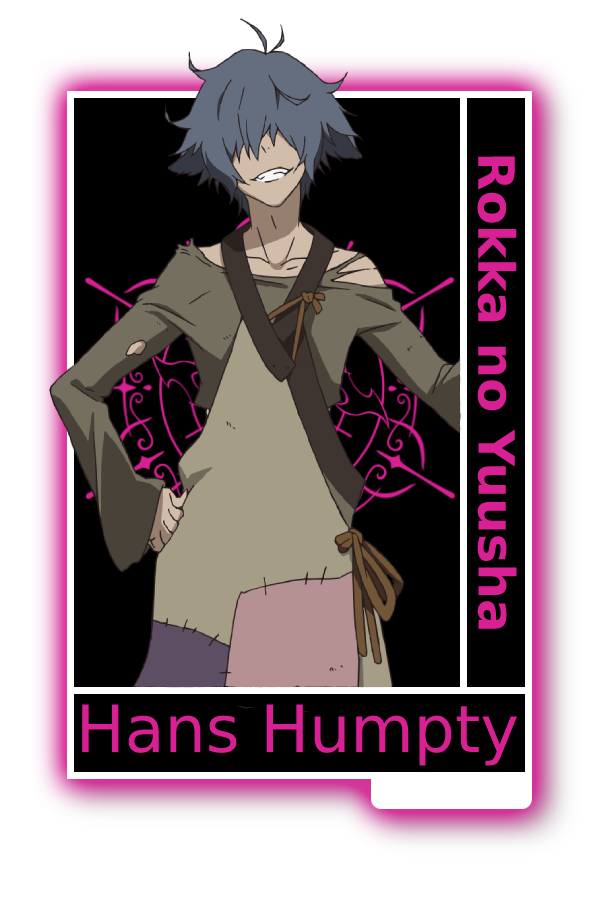
<style>
.page{position:relative;width:600px;height:900px;background:#000000}
.page>*{position:absolute;margin:0}
.t1{font:50px "MADETOMMY-Bold";color:#d81f94}
.t2{font:65px "CoolveticaRg-Regular";color:#d81f94}
</style>
<div class="page">
<p class="t1" style="left:477px;top:156px;width:40px;height:473px;rotate:90deg">Rokka no Yuusha</p>
<p class="t2" style="left:82px;top:704px;width:435px;height:62px">Hans Humpty</p>
</div>
